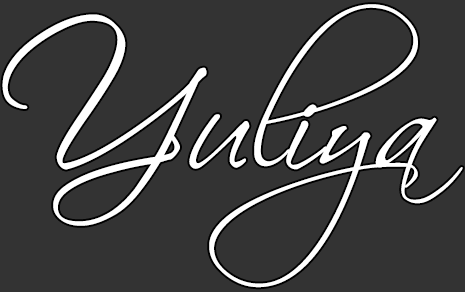
<style>
.page{position:relative;width:465px;height:292px;background:#333333}
.page>*{position:absolute;margin:0}
.t1{font:135px "Scriptina";color:#ffffff;font-weight:bold}
.t2{font:200px "Scriptina";color:#ffffff;font-weight:bold}
</style>
<div class="page">
<p class="t1" style="left:2px;top:4px;width:461px;height:284px"><span class="t2">Y</span>uliya</p>
</div>
